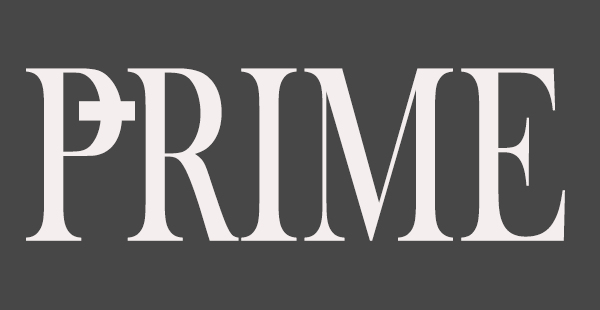
<style>
.page{position:relative;width:600px;height:310px;background:#474747}
.page>*{position:absolute;margin:0}
.t1{font:258.3px "BaskOldFace";color:#f4eeee;text-transform:uppercase;scale:0.68 1}
.t2{font:258.3px "BaskOldFace";letter-spacing:0.2em;color:#f4eeee;text-transform:uppercase}
</style>
<div class="page">
<p class="t1" style="left:26px;top:68px;width:539px;height:173px">Prime</p>
<p class="t2" style="left:79px;top:101px;width:56px;height:20px">-</p>
</div>
